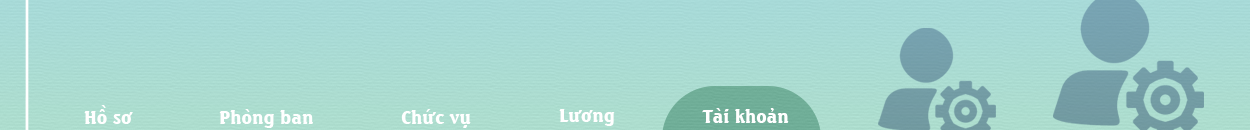
<style>
.page{position:relative;width:1250px;height:130px}
.page>*{position:absolute;margin:0}
.t1{font:18px "UVNChimBienNang";color:#ffffff}
</style>
<div class="page">
<p class="t1" style="left:84px;top:105px;width:49px;height:19px">Hồ sơ</p>
<p class="t1" style="left:219px;top:109px;width:94px;height:19px">Phòng ban</p>
<p class="t1" style="left:401px;top:109px;width:70px;height:19px">Chức vụ</p>
<p class="t1" style="left:559px;top:109px;width:56px;height:17px">Lương</p>
<p class="t1" style="left:702px;top:108px;width:87px;height:15px">Tài khoản</p>
</div>
